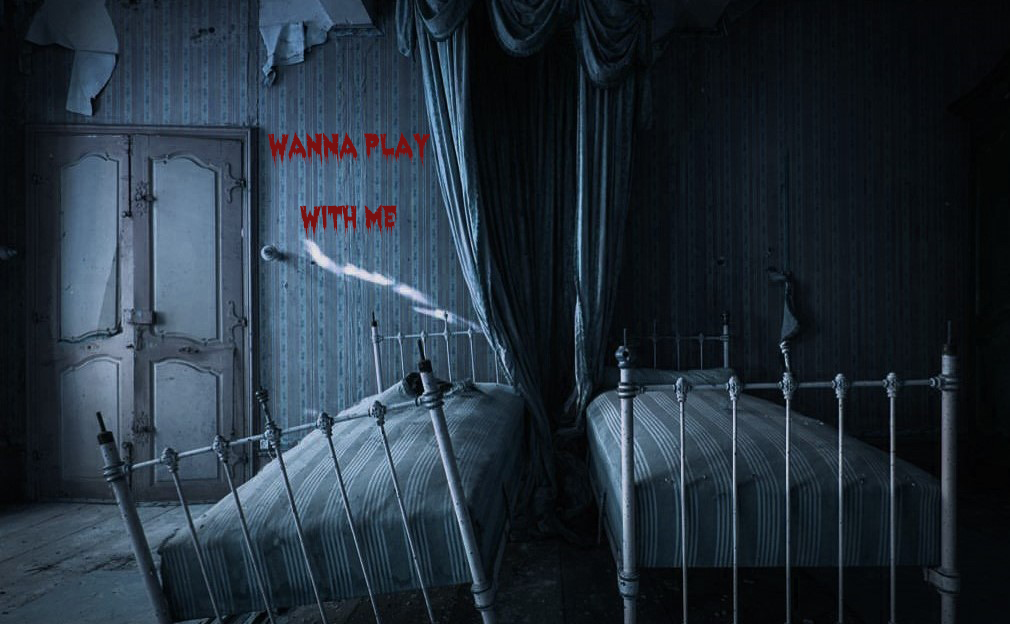
<style>
.page{position:relative;width:1010px;height:624px}
.page>*{position:absolute;margin:0}
.t1{font:29.8px/17.9px "ExquisiteCorpse";color:#781010}
</style>
<div class="page">
<p class="t1" style="left:268px;top:132px;width:162px;height:108px;text-align:center">Wanna Play <br><br><br><br>With Me</p>
</div>
